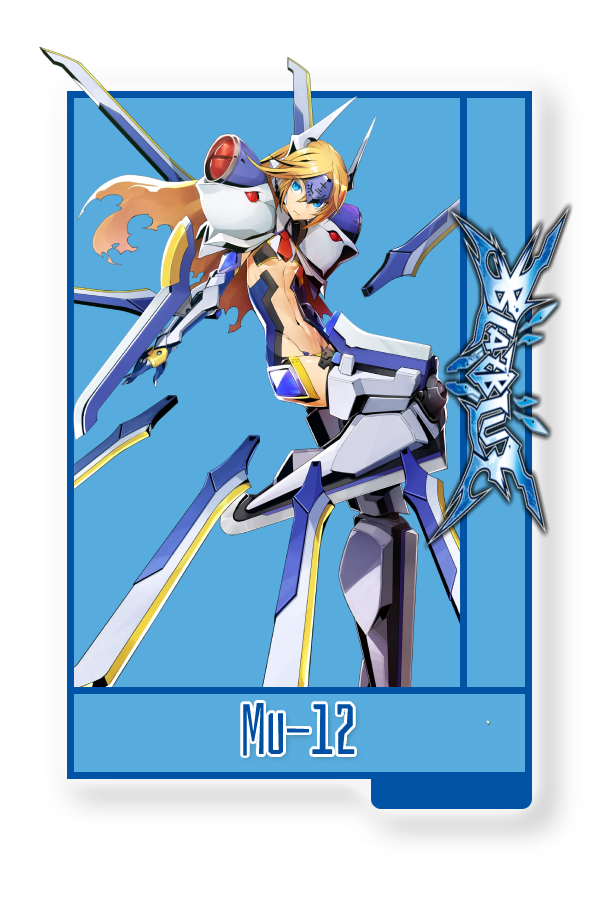
<style>
.page{position:relative;width:600px;height:900px;background:#ffffff}
.page>*{position:absolute;margin:0}
.t1{font:70px "Bahianita-Regular";color:#004fa2}
</style>
<div class="page">
<p class="t1" style="left:243px;top:702px;width:112px;height:54px">Mu-12</p>
</div>
